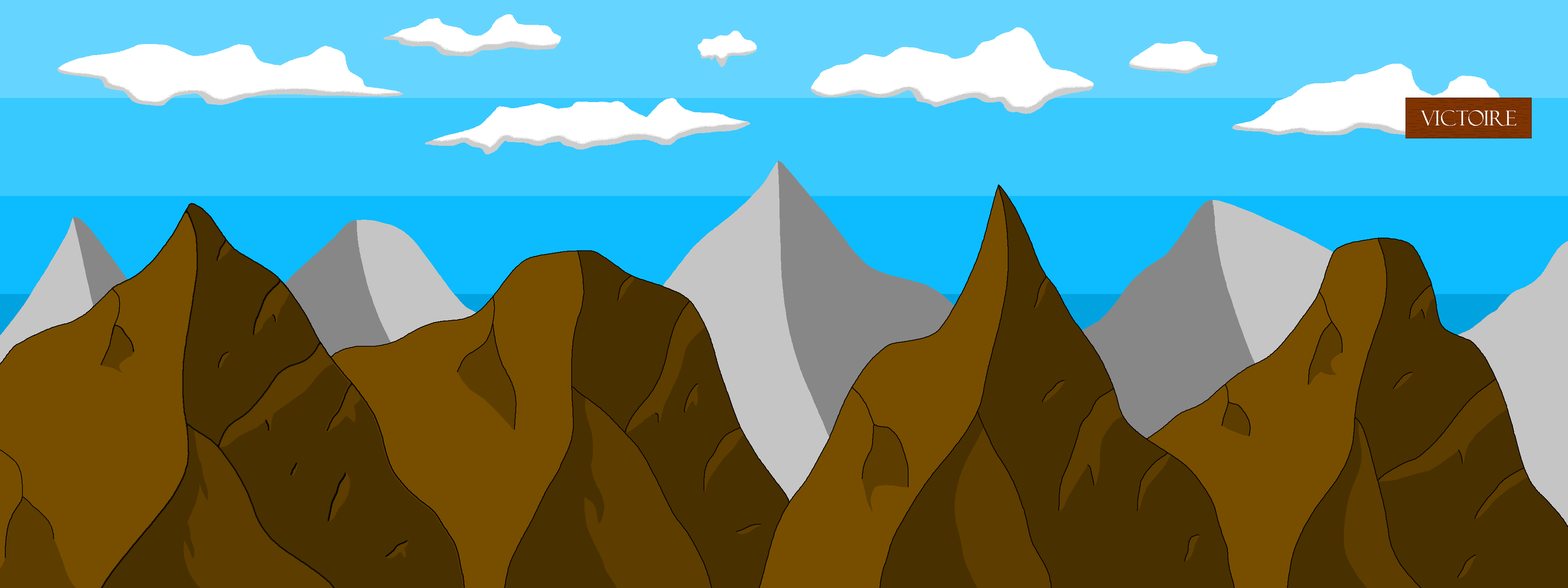
<style>
.page{position:relative;width:1568px;height:588px}
.page>*{position:absolute;margin:0}
.t1{font:20.4px "FelixTitlingMT";color:#ffffff}
</style>
<div class="page">
<p class="t1" style="left:1421px;top:110px;width:95px;height:16px">Victoire</p>
</div>
